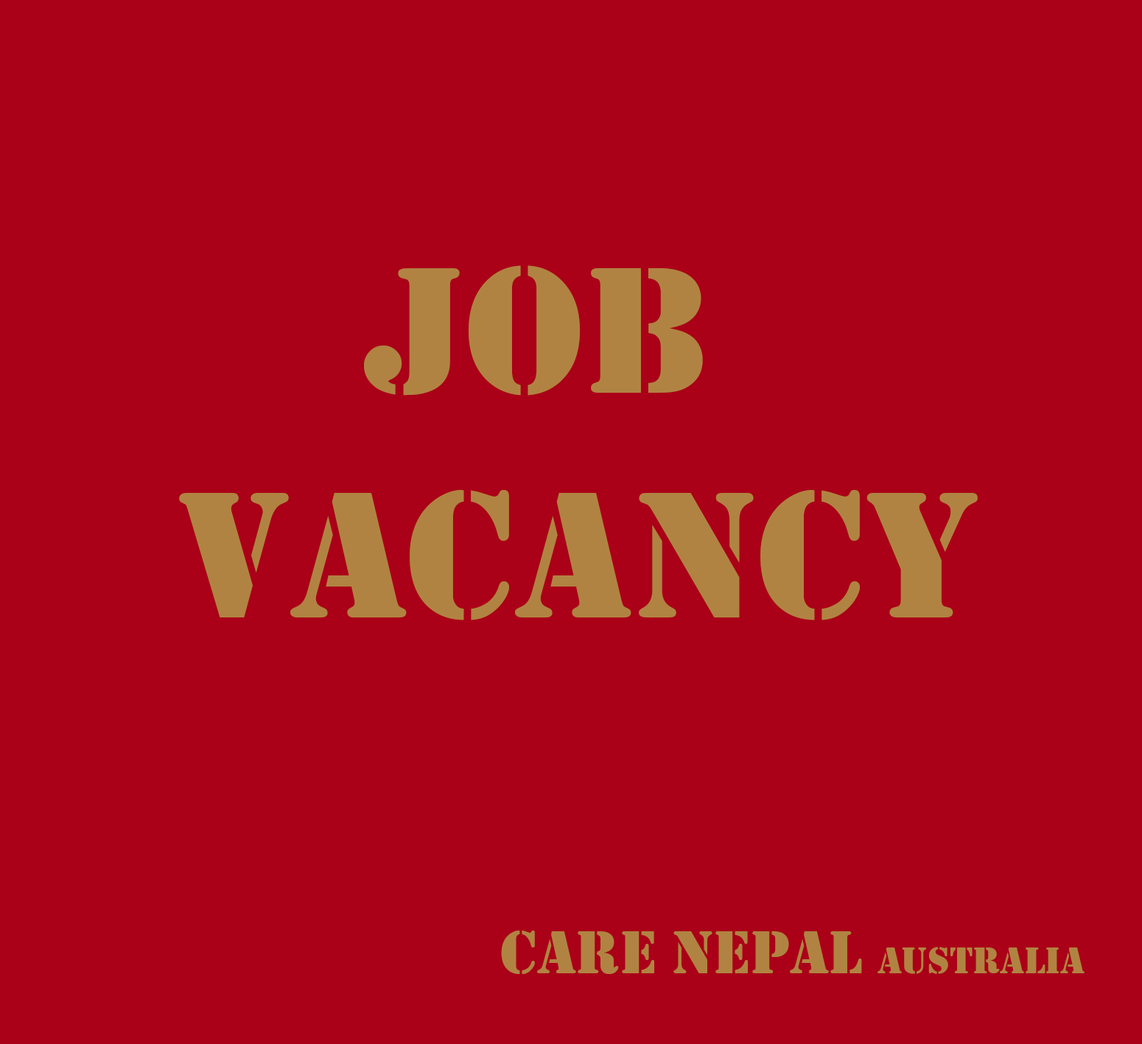
<style>
.page{position:relative;width:1142px;height:1044px;background:#aa0018}
.page>*{position:absolute;margin:0}
.t1{font:187.2px "Stencil";color:#b18342}
.t2{font:62.4px "Stencil";color:#b18342}
.t3{font:39px "Stencil";color:#b18342}
</style>
<div class="page">
<p class="t1" style="left:179px;top:265px;width:799px;height:355px">Job <br>vacancy</p>
<p class="t2" style="left:501px;top:931px;width:584px;height:43px">care nepal <span class="t3">australia</span></p>
</div>
